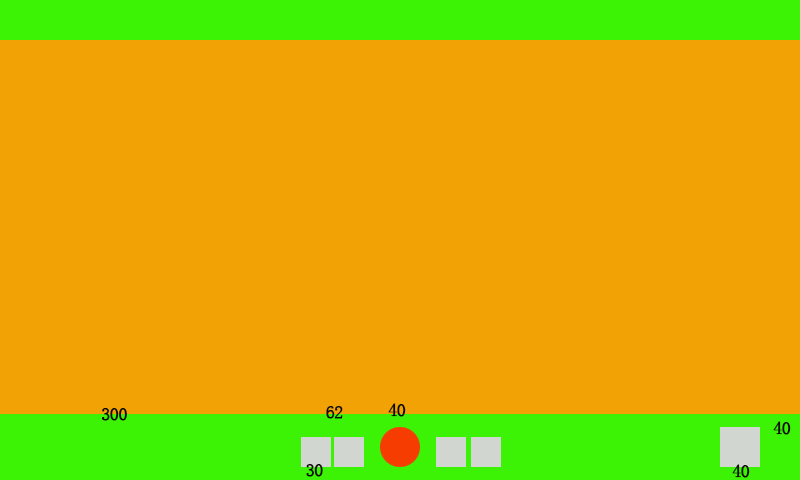
<style>
.page{position:relative;width:800px;height:480px;background:#f3a205}
.page>*{position:absolute;margin:0}
.t1{font:18px "SimSun";letter-spacing:-0.05em;color:#0a0a01;text-transform:uppercase;font-weight:bold}
</style>
<div class="page">
<p class="t1" style="left:101px;top:408px;width:26px;height:13px">300</p>
<p class="t1" style="left:326px;top:406px;width:17px;height:13px">62</p>
<p class="t1" style="left:388px;top:403px;width:18px;height:14px">40</p>
<p class="t1" style="left:773px;top:421px;width:18px;height:14px">40</p>
<p class="t1" style="left:306px;top:464px;width:17px;height:13px">30</p>
<p class="t1" style="left:732px;top:464px;width:18px;height:14px">40</p>
</div>
